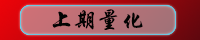
<style>
.page{position:relative;width:200px;height:40px}
.page>*{position:absolute;margin:0}
.t1{font:24px "STXingkai";color:#030303}
</style>
<div class="page">
<p class="t1" style="left:52px;top:9px;width:91px;height:21px">上期量化</p>
</div>
